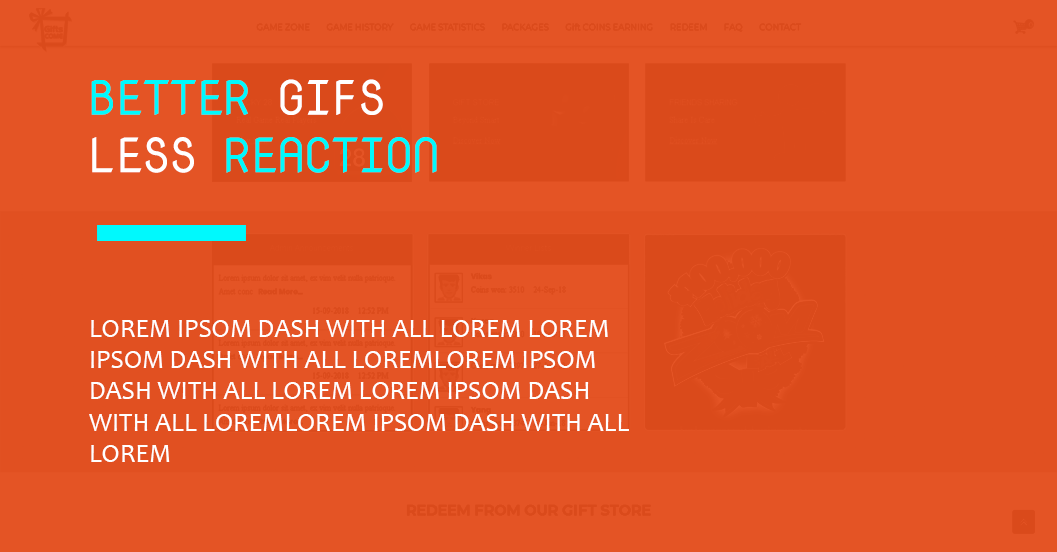
<style>
.page{position:relative;width:1057px;height:552px;background:#e45425}
.page>*{position:absolute;margin:0}
.t1{font:48px "NovaMono";color:#ffffff;text-transform:uppercase}
.t2{font:48px "NovaMono";color:#00f9fd;text-transform:uppercase}
.t3{font:26px "Candara";color:#ffffff;text-transform:uppercase}
</style>
<div class="page">
<p class="t1" style="left:91px;top:79px;width:346px;height:94px"><span class="t2">better</span> gifs<br>LESS <span class="t2">reaction</span></p>
<p class="t3" style="left:89px;top:320px;width:540px;height:142px">lorem ipsom dash with all lorem lorem ipsom dash with all loremlorem ipsom dash with all lorem lorem ipsom dash with all loremlorem ipsom dash with all lorem</p>
</div>
